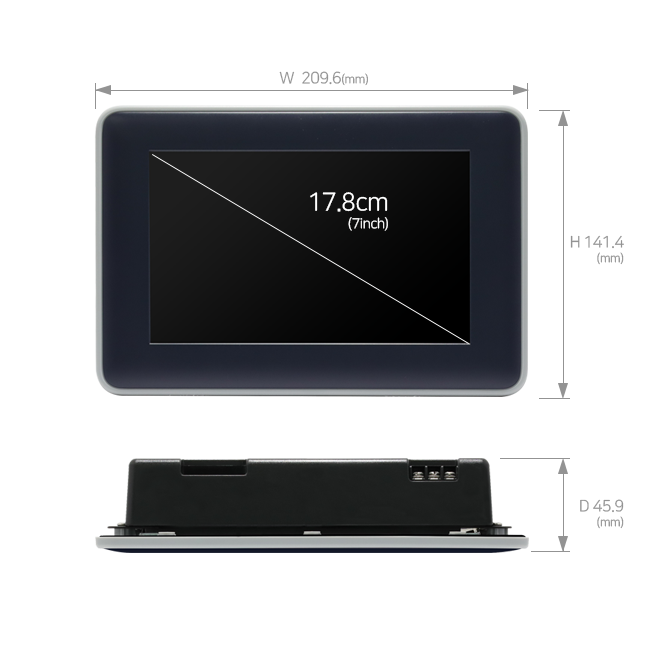
<style>
.page{position:relative;width:650px;height:650px;background:#ffffff}
.page>*{position:absolute;margin:0}
.t1{font:16px "NanumSquareR";letter-spacing:-0.03em;color:#939393}
.t2{font:12px "NanumSquareR";letter-spacing:-0.03em;color:#939393}
.t3{font:14px/18px "NanumSquareR";letter-spacing:-0.03em;color:#ffffff}
.t4{font:25px/18px "NanumSquareR";letter-spacing:-0.03em;color:#ffffff}
.t5{font:16px/15px "NanumSquareR";letter-spacing:-0.03em;color:#939393}
.t6{font:12px/15px "NanumSquareR";letter-spacing:-0.03em;color:#939393}
</style>
<div class="page">
<p class="t1" style="left:279px;top:71px;width:89px;height:15px">W  209.6<span class="t2">(mm)</span></p>
<p class="t3" style="left:310px;top:192px;width:78px;height:39px;text-align:right"><span class="t4">17.8cm<br></span>(7inch)</p>
<p class="t5" style="left:570px;top:235px;width:54px;height:30px;text-align:right">H 141.4<br><span class="t6">(mm)</span></p>
<p class="t5" style="left:580px;top:499px;width:44px;height:30px;text-align:right">D 45.9<br><span class="t6">(mm)</span></p>
</div>
